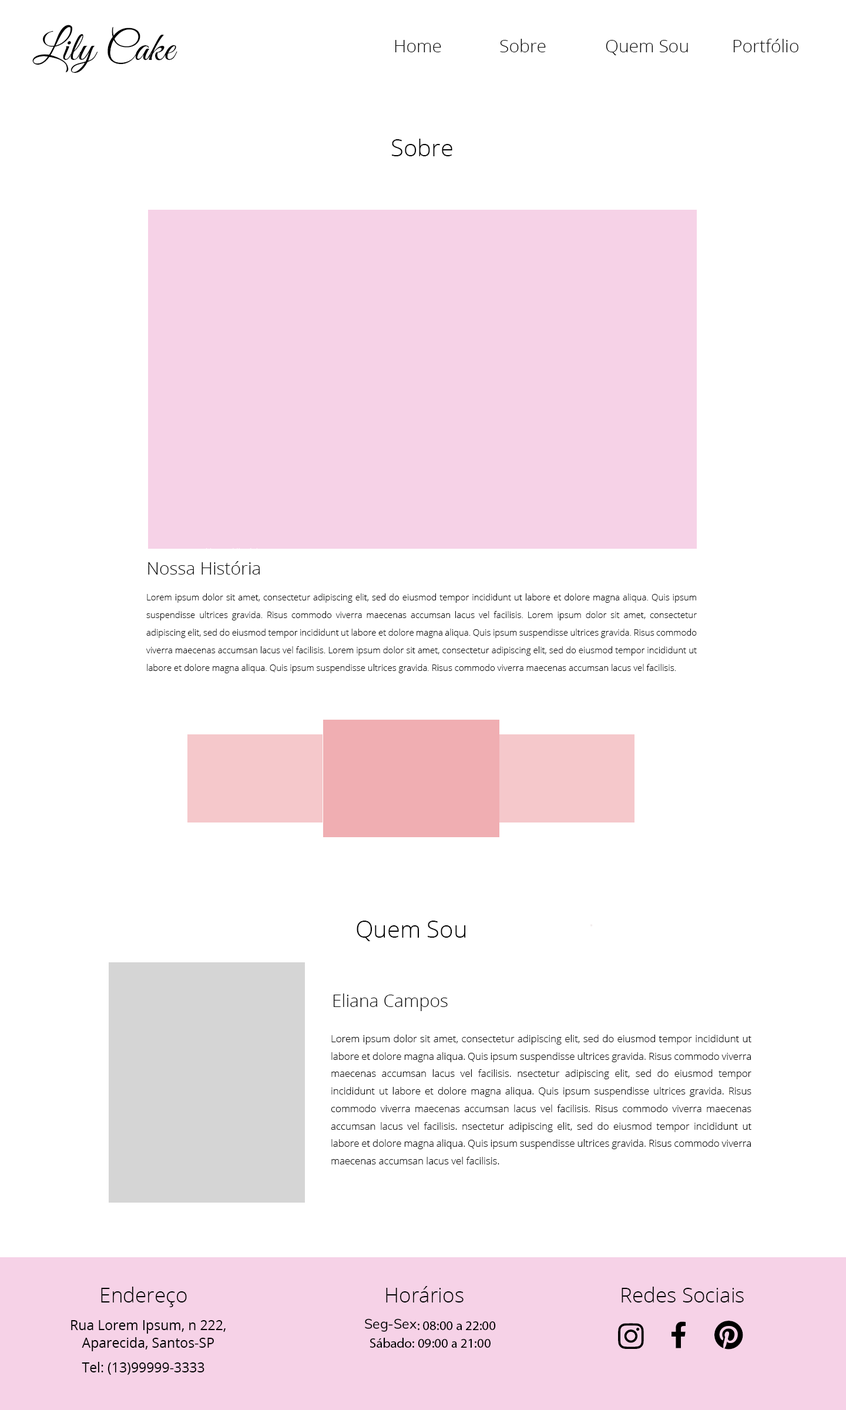
<style>
.page{position:relative;width:846px;height:1410px;background:#ffffff}
.page>*{position:absolute;margin:0}
.t1{font:41.1px "GreatVibes-Regular";color:#010101}
.t2{font:17.6px "OpenSans-Light";color:#010101}
.t3{font:23.5px "OpenSans-Light";color:#010101}
.t4{font:17.6px "OpenSans-Light";color:#000000}
.t5{font:8.8px/17.6px "OpenSans-Light";color:#010101}
.t6{font:23.5px "OpenSans-Light";color:#000000}
.t7{font:9.9px/17.5px "OpenSans-Light";color:#000000}
.t8{font:20.6px "OpenSans-Light";color:#000000}
.t9{font:13.5px/17.6px "OpenSans";color:#000000}
.t10{font:13.5px/17.6px "MyriadPro-Regular";color:#000000}
.t11{font:13.5px/17.6px "FontAwesome5Brands-Regular";color:#000000}
.t12{font:13.5px "OpenSans";color:#000000}
</style>
<div class="page">
<p class="t1" style="left:32px;top:25px;width:145px;height:48px">Lily Cake</p>
<p class="t2" style="left:395px;top:39px;width:403px;height:16px">Home   Sobre   Quem Sou   Portfólio</p>
<p class="t3" style="left:392px;top:139px;width:60px;height:17px">Sobre</p>
<p class="t4" style="left:148px;top:561px;width:112px;height:13px">Nossa História</p>
<p class="t5" style="left:146px;top:593px;width:551px;height:80px;text-align:justify">Lorem ipsum dolor sit amet, consectetur adipiscing elit, sed do eiusmod tempor incididunt ut labore et dolore magna aliqua. Quis ipsum suspendisse ultrices gravida. Risus commodo viverra maecenas accumsan lacus vel facilisis. Lorem ipsum dolor sit amet, consectetur adipiscing elit, sed do eiusmod tempor incididunt ut labore et dolore magna aliqua. Quis ipsum suspendisse ultrices gravida. Risus commodo viverra maecenas accumsan lacus vel facilisis. Lorem ipsum dolor sit amet, consectetur adipiscing elit, sed do eiusmod tempor incididunt ut labore et dolore magna aliqua. Quis ipsum suspendisse ultrices gravida. Risus commodo viverra maecenas accumsan lacus vel facilisis.</p>
<p class="t6" style="left:357px;top:920px;width:109px;height:21px">Quem Sou</p>
<p class="t4" style="left:333px;top:993px;width:115px;height:18px">Eliana Campos</p>
<p class="t7" style="left:331px;top:1034px;width:420px;height:130px;text-align:justify">Lorem ipsum dolor sit amet, consectetur adipiscing elit, sed do eiusmod tempor incididunt ut labore et dolore magna aliqua. Quis ipsum suspendisse ultrices gravida. Risus commodo viverra maecenas accumsan lacus vel facilisis. nsectetur adipiscing elit, sed do eiusmod tempor incididunt ut labore et dolore magna aliqua. Quis ipsum suspendisse ultrices gravida. Risus commodo viverra maecenas accumsan lacus vel facilisis. Risus commodo viverra maecenas accumsan lacus vel facilisis. nsectetur adipiscing elit, sed do eiusmod tempor incididunt ut labore et dolore magna aliqua. Quis ipsum suspendisse ultrices gravida. Risus commodo viverra maecenas accumsan lacus vel facilisis.</p>
<p class="t8" style="left:101px;top:1286px;width:86px;height:21px">Endereço</p>
<p class="t8" style="left:386px;top:1286px;width:77px;height:16px">Horários</p>
<p class="t8" style="left:621px;top:1286px;width:123px;height:16px">Redes Sociais</p>
<p class="t9" style="left:71px;top:1320px;width:155px;height:31px;text-align:center">Rua Lorem Ipsum, n 222, Aparecida, Santos-SP</p>
<p class="t10" style="left:365px;top:1318px;width:131px;height:29px;text-align:center"><span class="t11">Seg-Sex</span>: 08:00 a 22:00<br>Sábado: 09:00 a 21:00</p>
<p class="t12" style="left:82px;top:1362px;width:122px;height:13px">Tel: (13)99999-3333</p>
</div>
